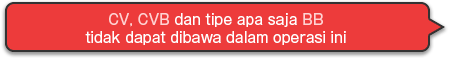
<style>
.page{position:relative;width:450px;height:58px;background:#ed3b3b}
.page>*{position:absolute;margin:0}
.t1{font:14px/18px "GothicMB101Pro-Regular";color:#ffffff}
.t2{font:14px/18px "GothicMB101Pro-Regular";color:#ffd3d3}
</style>
<div class="page">
<p class="t1" style="left:85px;top:13px;width:261px;height:32px;text-align:center"><span class="t2">CV, CVB</span> dan tipe apa saja <span class="t2">BB<br></span>tidak dapat dibawa dalam operasi ini</p>
</div>
